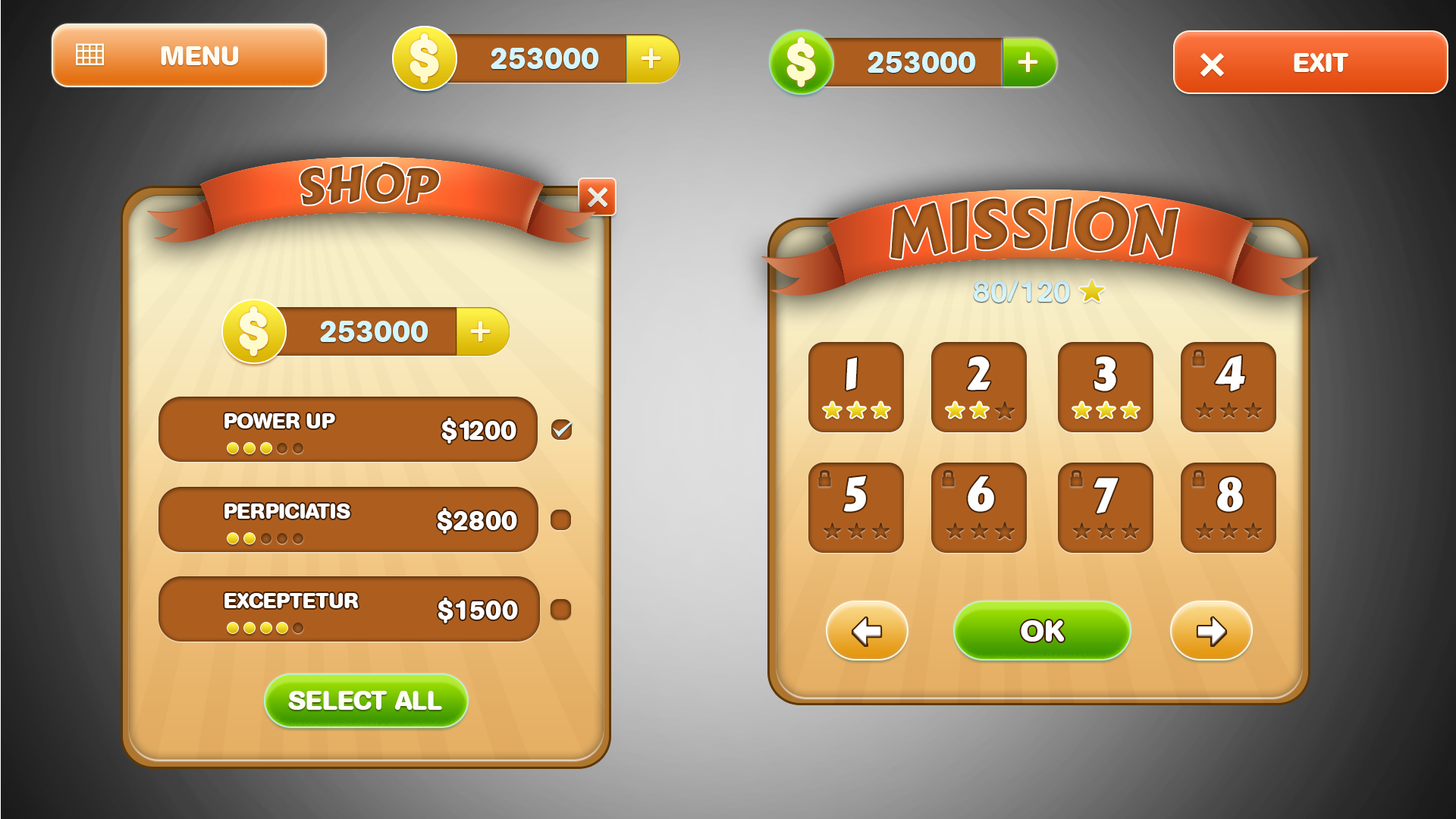
<style>
.page{position:relative;width:1456px;height:819px}
.page>*{position:absolute;margin:0}
.t1{font:26.5px "AGBookRounded-Bold";color:#fdfdf3;text-transform:uppercase}
.t2{font:30.3px "AGBookRounded-Bold";color:#d4f5ff;text-transform:uppercase}
.t3{font:48.5px "CarterOne";color:#98531a;text-transform:uppercase}
.t4{font:68.2px "CarterOne";color:#a1581c;text-transform:uppercase}
.t5{font:30.3px "AGBookRounded-Medium";color:#d2f2fc;text-transform:uppercase}
.t6{font:45.5px "CarterOne";color:#ffffff;text-transform:uppercase}
.t7{font:21.2px "AGBookRounded-Bold";color:#ffffff;text-transform:uppercase}
.t8{font:26.5px "AGBookRounded-Bold";color:#ffffff;text-transform:uppercase}
.t9{font:30.3px "AGBookRounded-Bold";color:#ffffff;text-transform:uppercase}
</style>
<div class="page">
<p class="t1" style="left:161px;top:46px;width:78px;height:19px">MENU</p>
<p class="t2" style="left:491px;top:48px;width:108px;height:21px">253000</p>
<p class="t2" style="left:868px;top:52px;width:108px;height:21px">253000</p>
<p class="t1" style="left:1294px;top:53px;width:55px;height:19px">EXIT</p>
<p class="t3" style="left:300px;top:163px;width:140px;height:42px">SHOP</p>
<p class="t4" style="left:890px;top:197px;width:289px;height:62px">mission</p>
<p class="t5" style="left:974px;top:280px;width:96px;height:23px">80/120</p>
<p class="t2" style="left:320px;top:321px;width:108px;height:21px">253000</p>
<p class="t6" style="left:846px;top:357px;width:11px;height:34px">1</p>
<p class="t6" style="left:968px;top:356px;width:22px;height:35px">2</p>
<p class="t6" style="left:1094px;top:356px;width:22px;height:35px">3</p>
<p class="t6" style="left:1215px;top:356px;width:30px;height:35px">4</p>
<p class="t7" style="left:224px;top:413px;width:111px;height:15px">POWER UP</p>
<p class="t8" style="left:441px;top:418px;width:75px;height:26px">$1200</p>
<p class="t6" style="left:843px;top:475px;width:23px;height:37px">5</p>
<p class="t6" style="left:968px;top:476px;width:26px;height:36px">6</p>
<p class="t6" style="left:1094px;top:478px;width:25px;height:35px">7</p>
<p class="t6" style="left:1217px;top:477px;width:26px;height:35px">8</p>
<p class="t7" style="left:224px;top:504px;width:126px;height:15px">Perpiciatis</p>
<p class="t8" style="left:437px;top:508px;width:80px;height:26px">$2800</p>
<p class="t7" style="left:224px;top:593px;width:135px;height:15px">exceptetur</p>
<p class="t8" style="left:438px;top:598px;width:80px;height:25px">$1500</p>
<p class="t9" style="left:1021px;top:620px;width:44px;height:22px">ok</p>
<p class="t1" style="left:288px;top:691px;width:154px;height:19px">select all</p>
</div>
